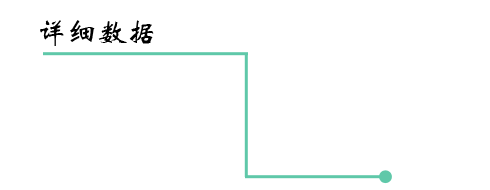
<style>
.page{position:relative;width:490px;height:190px;background:#ffffff}
.page>*{position:absolute;margin:0}
.t1{font:30px "STXinwei";color:#000000}
</style>
<div class="page">
<p class="t1" style="left:40px;top:20px;width:114px;height:26px">详细数据</p>
</div>
